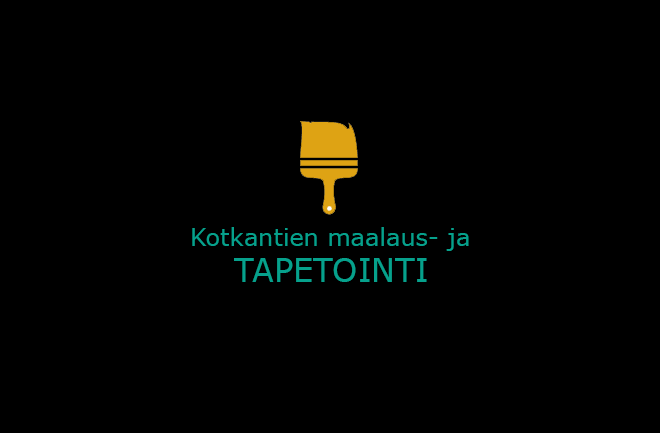
<style>
.page{position:relative;width:660px;height:433px;background:#000000}
.page>*{position:absolute;margin:0}
.t1{font:24px "MSReferenceSansSerif";color:#06a18c}
.t2{font:32px "MSReferenceSansSerif";color:#06a18c}
</style>
<div class="page">
<p class="t1" style="left:192px;top:227px;width:277px;height:24px">Kotkantien maalaus- ja</p>
<p class="t2" style="left:234px;top:258px;width:193px;height:24px">TAPETOINTI</p>
</div>
